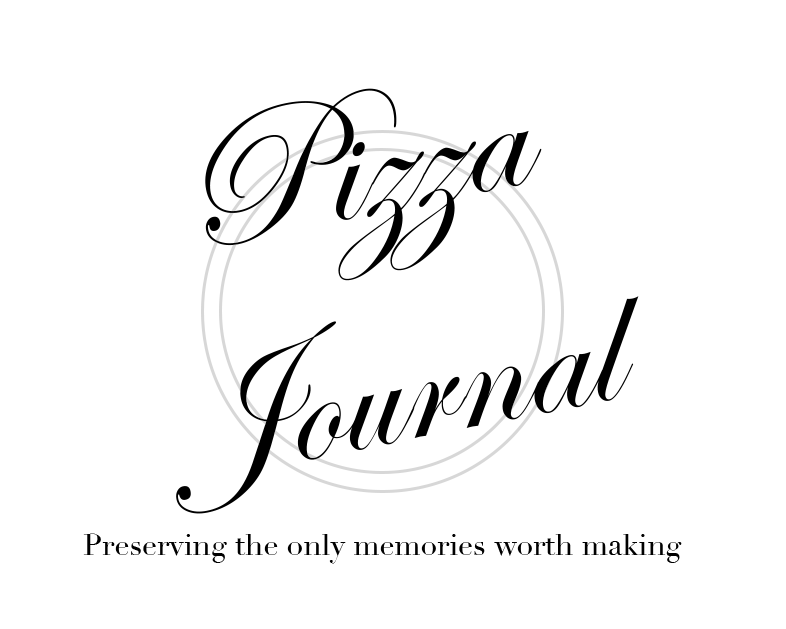
<style>
.page{position:relative;width:786px;height:629px;background:#ffffff}
.page>*{position:absolute;margin:0}
.t1{font:190px "EdwardianScriptITC";color:#000000}
.t2{font:30px "Didot";color:#000000}
</style>
<div class="page">
<p class="t1" style="left:176px;top:88px;width:463px;height:426px;text-align:center;rotate:-11deg">Pizza <br>Journal</p>
<p class="t2" style="left:83px;top:533px;width:599px;height:31px">Preserving the only memories worth making</p>
</div>
